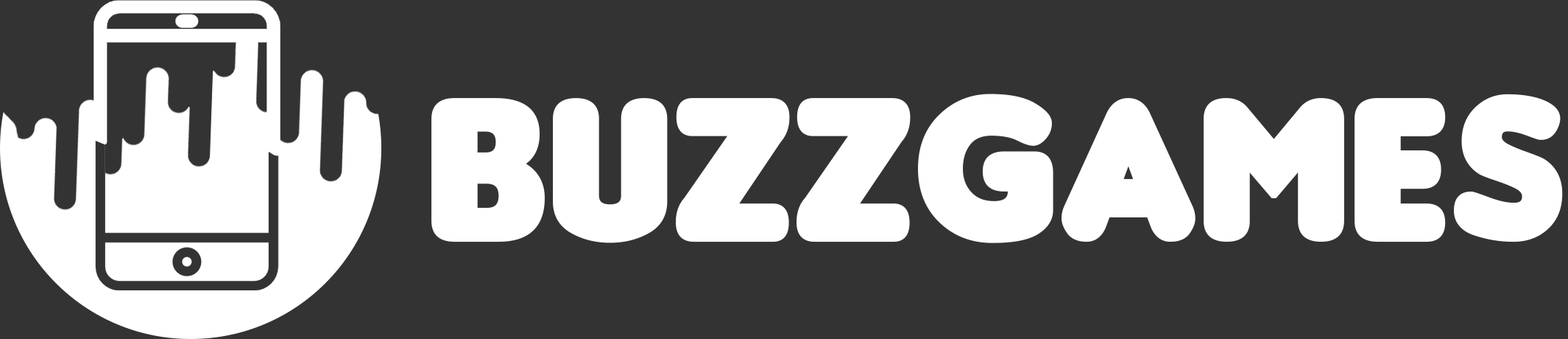
<style>
.page{position:relative;width:1568px;height:339px;background:#333333}
.page>*{position:absolute;margin:0}
.t1{font:209.1px "Insaniburger";color:#ffffff;font-weight:bold}
</style>
<div class="page">
<p class="t1" style="left:431px;top:93px;width:1132px;height:150px">Buzzgames</p>
</div>
